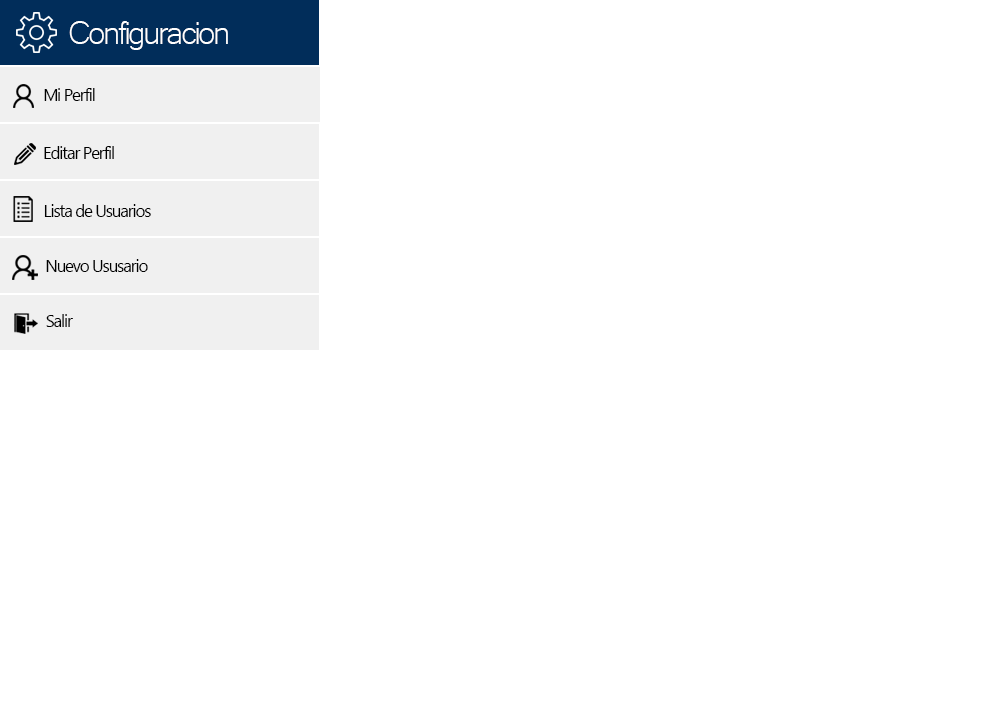
<style>
.page{position:relative;width:1000px;height:720px;background:#ffffff}
.page>*{position:absolute;margin:0}
.t1{font:41.7px "Microsoft-Yi-Baiti";letter-spacing:-0.06em;color:#ffffff}
.t2{font:16.7px "MicrosoftNewTaiLue";letter-spacing:-0.06em;color:#000000}
</style>
<div class="page">
<p class="t1" style="left:69px;top:21px;width:159px;height:29px">Configuracion</p>
<p class="t2" style="left:44px;top:88px;width:51px;height:13px">Mi Perfil</p>
<p class="t2" style="left:44px;top:146px;width:70px;height:13px">Editar Perfil</p>
<p class="t2" style="left:44px;top:204px;width:107px;height:13px">Lista de Usuarios</p>
<p class="t2" style="left:46px;top:259px;width:102px;height:13px">Nuevo Ususario</p>
<p class="t2" style="left:46px;top:314px;width:27px;height:13px">Salir</p>
</div>
